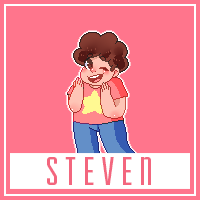
<style>
.page{position:relative;width:200px;height:200px;background:#ff758c}
.page>*{position:absolute;margin:0}
.t1{font:41.7px "Fairview-SmallCaps";color:#f3667e}
</style>
<div class="page">
<p class="t1" style="left:47px;top:157px;width:104px;height:28px">S T E V E N</p>
</div>
